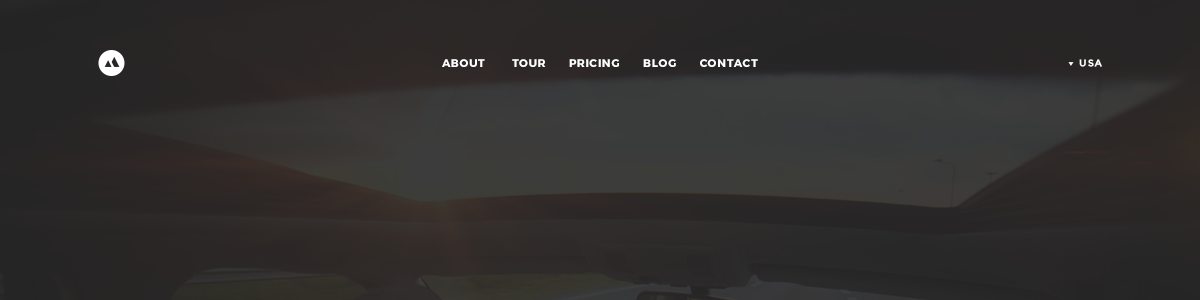
<style>
.page{position:relative;width:1200px;height:300px}
.page>*{position:absolute;margin:0}
.t1{font:11px "Montserrat-Bold";letter-spacing:0.07em;color:#ffffff;text-transform:uppercase}
.t2{font:10px "Montserrat-Bold";letter-spacing:0.08em;color:#ffffff}
</style>
<div class="page">
<p class="t1" style="left:442px;top:59px;width:316px;height:8px">About       Tour      Pricing      Blog      Contact</p>
<p class="t2" style="left:1079px;top:59px;width:23px;height:8px">USA</p>
</div>
